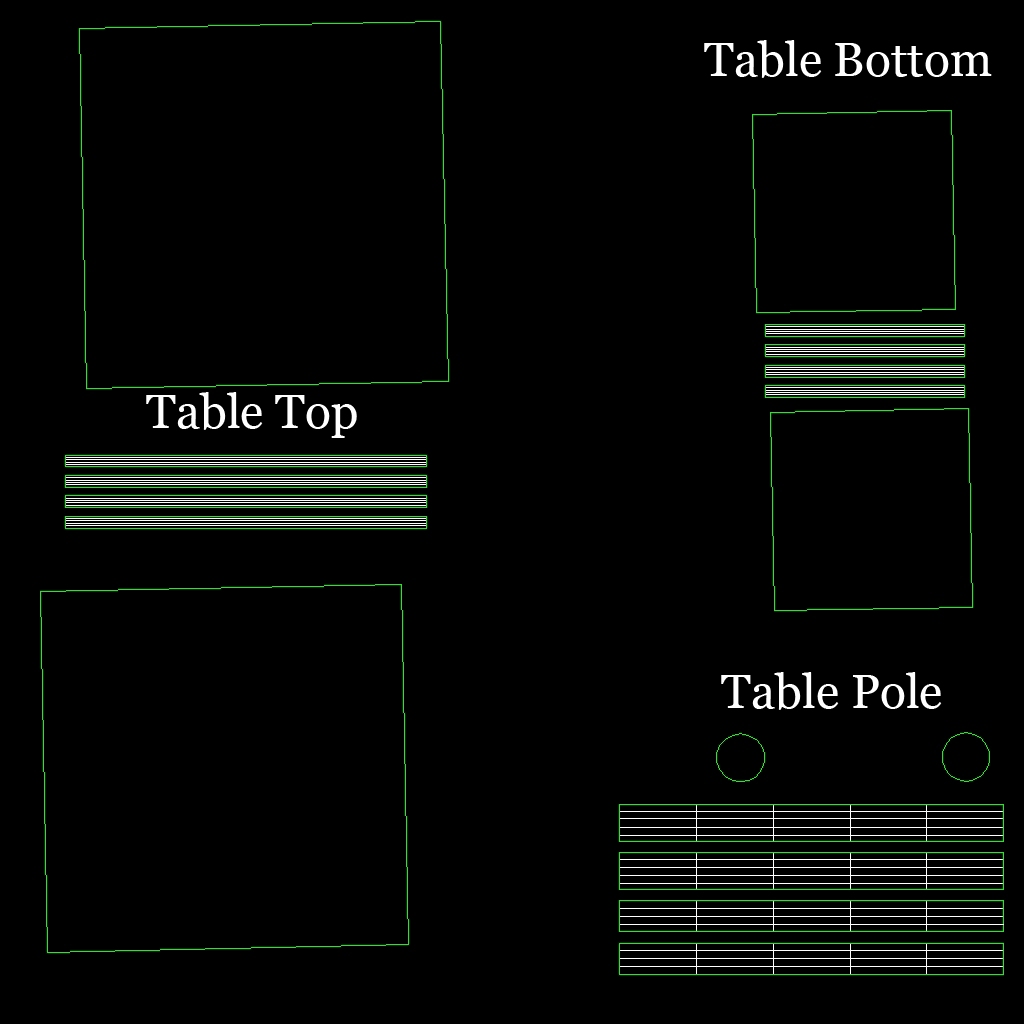
<style>
.page{position:relative;width:1024px;height:1024px;background:#000000}
.page>*{position:absolute;margin:0}
.t1{font:48px "Georgia";color:#ffffff}
</style>
<div class="page">
<p class="t1" style="left:704px;top:40px;width:288px;height:38px">Table Bottom</p>
<p class="t1" style="left:146px;top:392px;width:211px;height:46px">Table Top</p>
<p class="t1" style="left:721px;top:672px;width:221px;height:38px">Table Pole</p>
</div>
